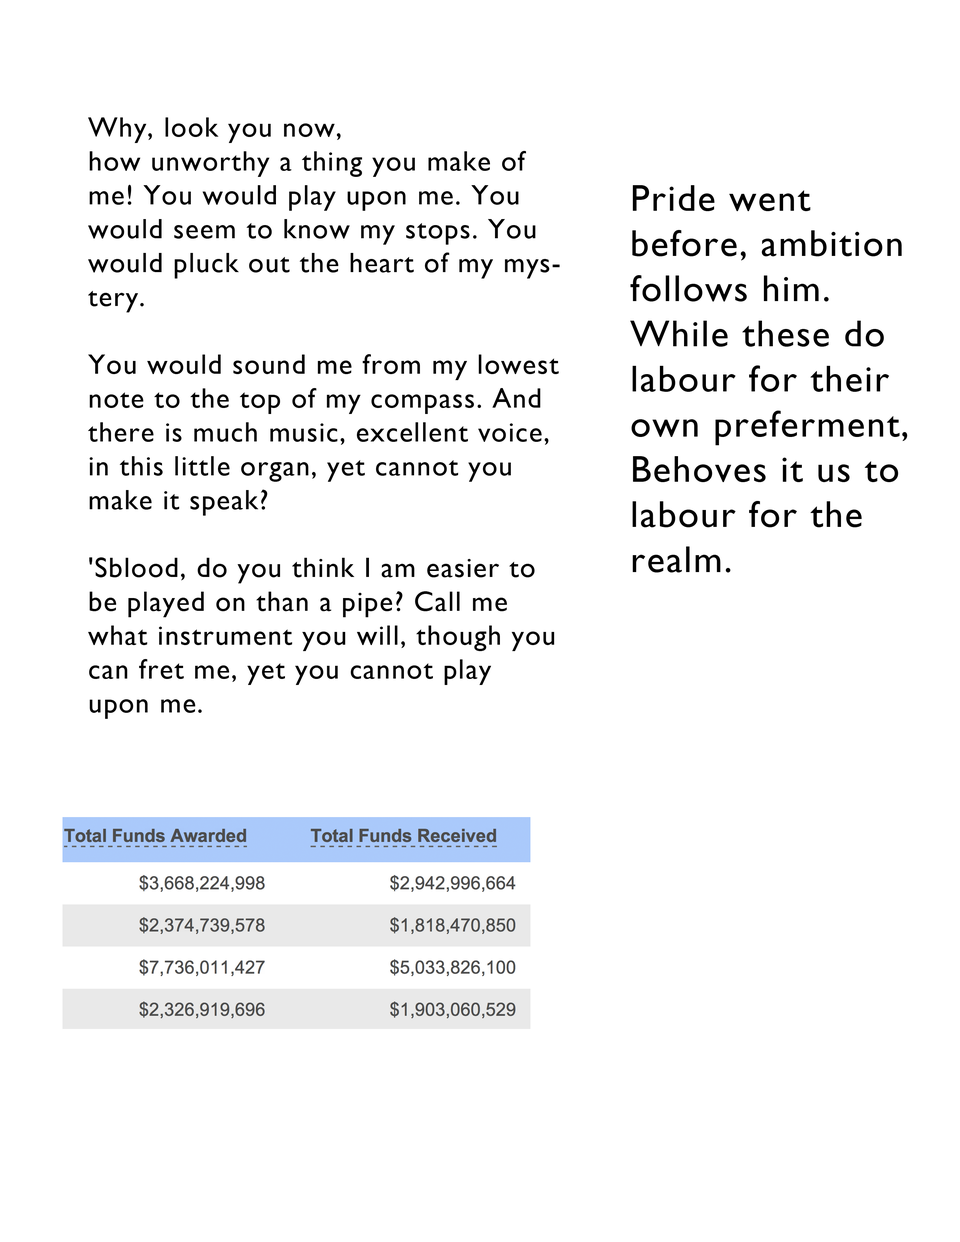
<style>
.page{position:relative;width:960px;height:1242px;background:#ffffff}
.page>*{position:absolute;margin:0}
.t1{font:28.2px "GillSans";letter-spacing:0.04em;color:#000000}
.t2{font:37.6px "GillSans";letter-spacing:0.04em;color:#000000}
</style>
<div class="page">
<p class="t1" style="left:88px;top:117px;width:472px;height:602px">Why, look you now, <br>how unworthy a thing you make of me! You would play upon me. You would seem to know my stops. You would pluck out the heart of my mystery. <br><br>You would sound me from my lowest note to the top of my compass. And there is much music, excellent voice, in this little organ, yet cannot you make it speak? <br><br>'Sblood, do you think I am easier to be played on than a pipe? Call me what instrument you will, though you can fret me, yet you cannot play upon me.</p>
<p class="t2" style="left:630px;top:185px;width:277px;height:388px">Pride went before, ambition follows him. <br>While these do labour for their own preferment, <br>Behoves it us to labour for the realm.</p>
</div>
